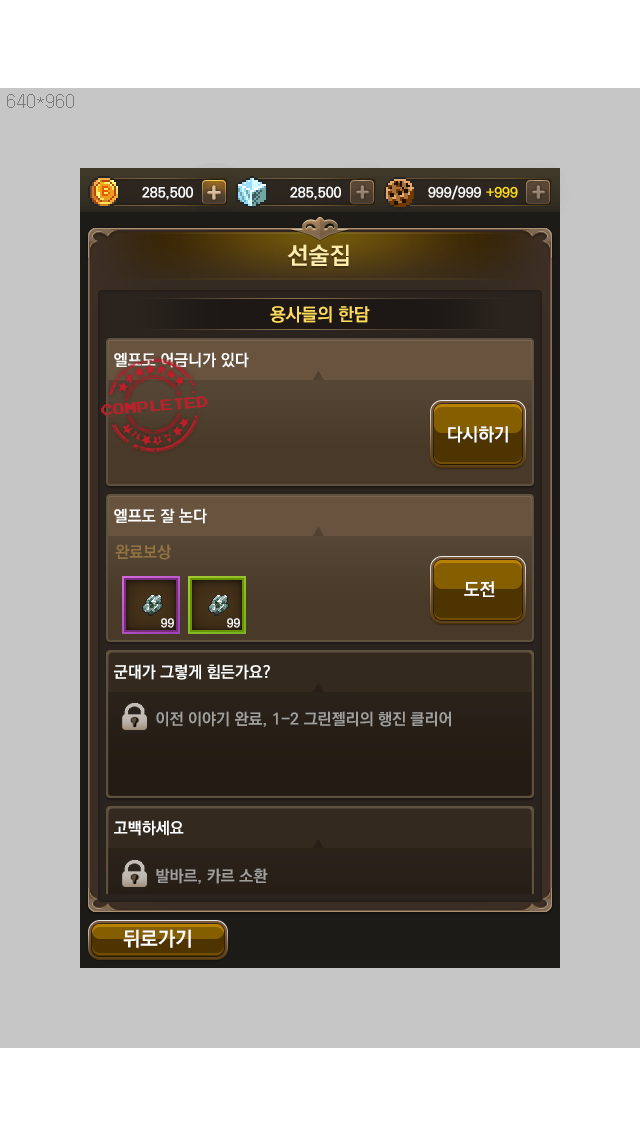
<style>
.page{position:relative;width:640px;height:1136px;background:#c6c6c6}
.page>*{position:absolute;margin:0}
.t1{font:24px "KoPubDotumBold";color:#ffedab}
.t2{font:18px "KoPubDotumBold";color:#ffda5b}
.t3{font:16px "KoPubDotumBold";color:#ffffff}
.t4{font:12px "PressStart2P";color:#bd1e2c;text-transform:uppercase}
.t5{font:18px "KoPubDotumBold";color:#ffffff}
.t6{font:16px "KoPubDotumBold";color:#937441}
.t7{font:12px "KoPubDotumBold";color:#ffffff}
.t8{font:16px "KoPubDotumBold";color:#9f9f9d}
.t9{font:20px "KoPubDotumBold";color:#ffffff}
</style>
<div class="page">
<p class="t1" style="left:287px;top:244px;width:62px;height:22px">선술집</p>
<p class="t2" style="left:270px;top:306px;width:100px;height:17px">용사들의 한담</p>
<p class="t3" style="left:114px;top:352px;width:135px;height:16px">엘프도 어금니가 있다</p>
<p class="t4" style="left:101px;top:396px;width:107px;height:20px;rotate:-5deg">completed</p>
<p class="t5" style="left:448px;top:426px;width:60px;height:17px">다시하기</p>
<p class="t3" style="left:114px;top:508px;width:93px;height:16px">엘프도 잘 논다</p>
<p class="t6" style="left:115px;top:544px;width:56px;height:16px">완료보상</p>
<p class="t5" style="left:464px;top:581px;width:31px;height:16px">도전</p>
<p class="t7" style="left:161px;top:618px;width:13px;height:10px">99</p>
<p class="t7" style="left:227px;top:618px;width:13px;height:10px">99</p>
<p class="t3" style="left:114px;top:664px;width:156px;height:16px">군대가 그렇게 힘든가요?</p>
<p class="t8" style="left:156px;top:711px;width:295px;height:16px">이전 이야기 완료, 1-2 그린젤리의 행진 클리어</p>
<p class="t9" style="left:123px;top:929px;width:68px;height:19px">뒤로가기</p>
</div>
